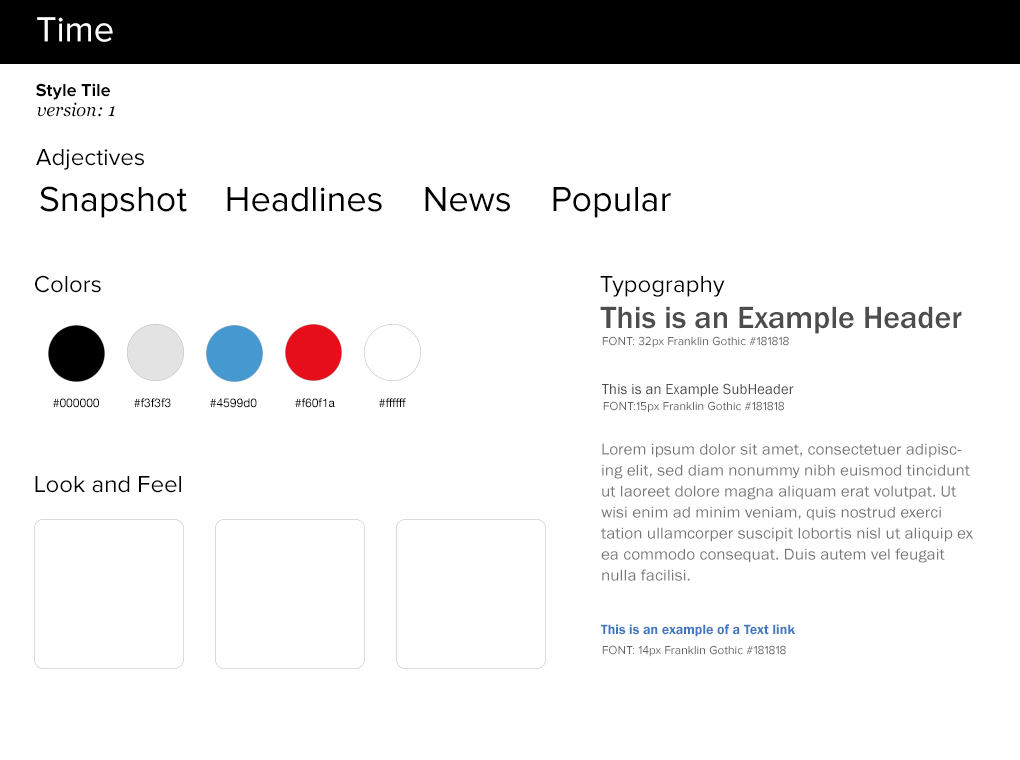
<style>
.page{position:relative;width:1020px;height:760px;background:#ffffff}
.page>*{position:absolute;margin:0}
.t1{font:36px "ProximaNova-Regular";color:#ffffff}
.t2{font:18px "ProximaNova-Bold";color:#000000}
.t3{font:18px "Georgia-Italic";color:#000000}
.t4{font:24px "ProximaNova-Regular";color:#000000}
.t5{font:36px "ProximaNova-Regular";color:#000000}
.t6{font:32px "FranklinGothicURW-Med";color:#4d4d4d}
.t7{font:12px "ProximaNova-Regular";color:#666666}
.t8{font:15px "FranklinGothic-Book";color:#4d4d4d}
.t9{font:12px "HelveticaNeue";color:#000000}
.t10{font:16px/21px "FranklinGothicURW-Boo";color:#767676;scale:1.07 1}
.t11{font:14px "FranklinGothicURW-Dem";color:#4078c0}
</style>
<div class="page">
<p class="t1" style="left:37px;top:17px;width:76px;height:25px">Time</p>
<p class="t2" style="left:36px;top:83px;width:74px;height:17px">Style Tile</p>
<p class="t3" style="left:37px;top:102px;width:78px;height:15px">version: 1</p>
<p class="t4" style="left:36px;top:149px;width:108px;height:21px">Adjectives</p>
<p class="t5" style="left:40px;top:186px;width:147px;height:32px">Snapshot</p>
<p class="t5" style="left:227px;top:187px;width:155px;height:25px">Headlines</p>
<p class="t5" style="left:425px;top:187px;width:85px;height:25px">News</p>
<p class="t5" style="left:553px;top:187px;width:118px;height:31px">Popular</p>
<p class="t4" style="left:35px;top:275px;width:66px;height:18px">Colors</p>
<p class="t4" style="left:600px;top:276px;width:125px;height:21px">Typography</p>
<p class="t6" style="left:600px;top:306px;width:362px;height:28px">This is an Example Header</p>
<p class="t7" style="left:602px;top:336px;width:187px;height:12px">FONT: 32px Franklin Gothic #181818</p>
<p class="t8" style="left:602px;top:383px;width:192px;height:14px">This is an Example SubHeader</p>
<p class="t9" style="left:53px;top:398px;width:46px;height:10px">#000000</p>
<p class="t9" style="left:134px;top:398px;width:37px;height:10px">#f3f3f3</p>
<p class="t9" style="left:210px;top:398px;width:47px;height:10px">#4599d0</p>
<p class="t9" style="left:295px;top:398px;width:40px;height:10px">#f60f1a</p>
<p class="t9" style="left:379px;top:398px;width:27px;height:9px">#ffffff</p>
<p class="t7" style="left:603px;top:401px;width:181px;height:12px">FONT:15px Franklin Gothic #181818</p>
<p class="t10" style="left:601px;top:443px;width:372px;height:138px">Lorem ipsum dolor sit amet, consectetuer adipiscing elit, sed diam nonummy nibh euismod tincidunt ut laoreet dolore magna aliquam erat volutpat. Ut wisi enim ad minim veniam, quis nostrud exerci tation ullamcorper suscipit lobortis nisl ut aliquip ex ea commodo consequat. Duis autem vel feugait nulla facilisi.</p>
<p class="t4" style="left:35px;top:476px;width:146px;height:17px">Look and Feel</p>
<p class="t11" style="left:601px;top:624px;width:194px;height:13px">This is an example of a Text link</p>
<p class="t7" style="left:602px;top:645px;width:184px;height:12px">FONT: 14px Franklin Gothic #181818</p>
</div>
